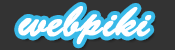
<style>
.page{position:relative;width:175px;height:50px;background:#333333}
.page>*{position:absolute;margin:0}
.t1{font:42.3px "BrushScriptStd";color:#fefeff;font-weight:bold}
</style>
<div class="page">
<p class="t1" style="left:18px;top:6px;width:134px;height:39px">webpiki</p>
</div>
